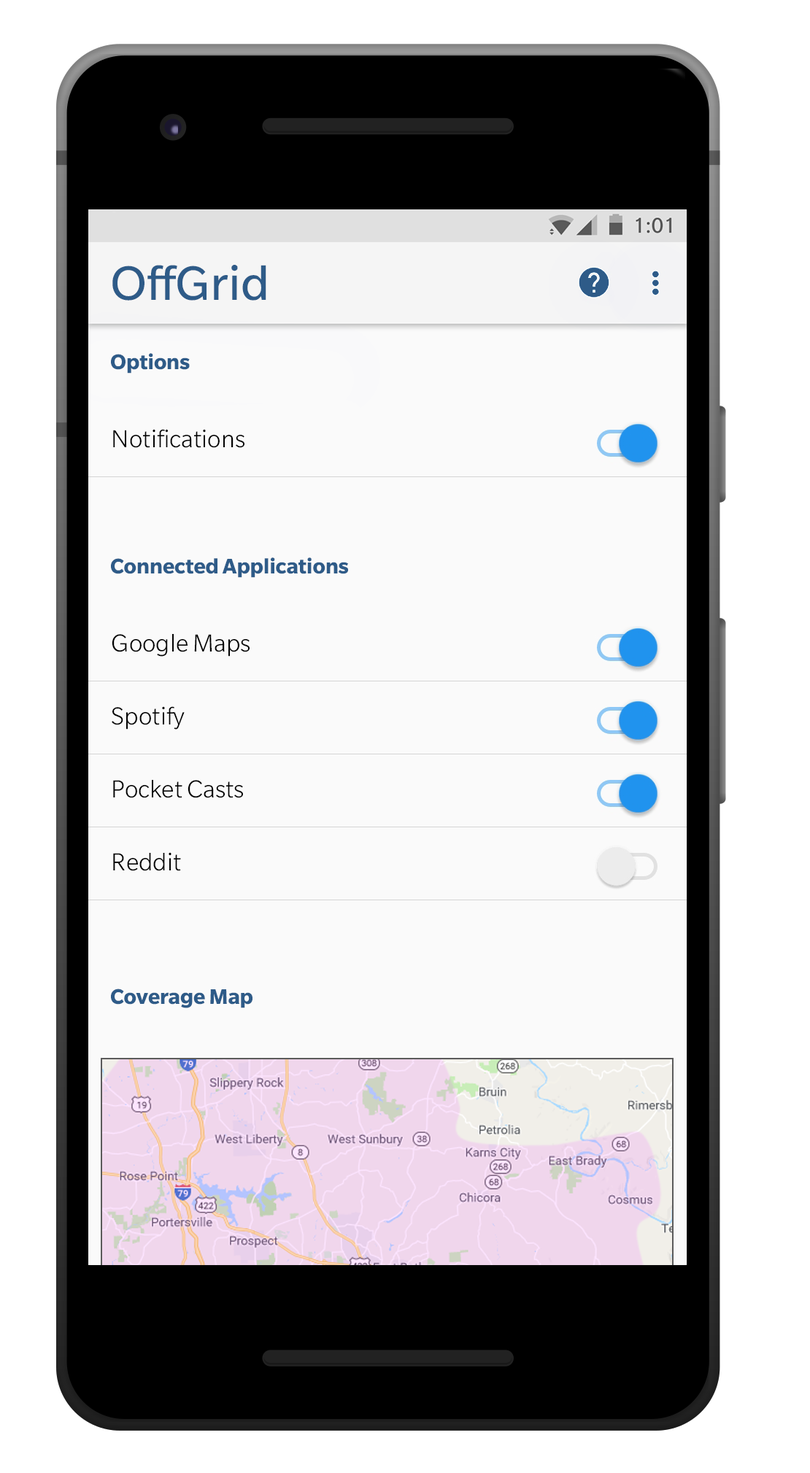
<style>
.page{position:relative;width:810px;height:1473px;background:#fafafa}
.page>*{position:absolute;margin:0}
.t1{font:46.6px "SlateForOnePlus-Regular";color:#2e5b88}
.t2{font:20.4px "SlateForOnePlus-Bold";color:#2e5b88}
.t3{font:23.8px "SlateForOnePlusLight";color:#000000}
</style>
<div class="page">
<p class="t1" style="left:112px;top:265px;width:154px;height:36px">OffGrid</p>
<p class="t2" style="left:111px;top:353px;width:79px;height:20px">Options</p>
<p class="t3" style="left:113px;top:429px;width:131px;height:19px">Notifications</p>
<p class="t2" style="left:111px;top:557px;width:237px;height:21px">Connected Applications</p>
<p class="t3" style="left:112px;top:634px;width:137px;height:22px">Google Maps</p>
<p class="t3" style="left:112px;top:706px;width:73px;height:23px">Spotify</p>
<p class="t3" style="left:113px;top:780px;width:130px;height:18px">Pocket Casts</p>
<p class="t3" style="left:113px;top:852px;width:68px;height:19px">Reddit</p>
<p class="t2" style="left:111px;top:988px;width:141px;height:20px">Coverage Map</p>
</div>
